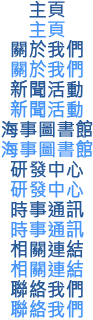
<style>
.page{position:relative;width:93px;height:320px;background:#ffffff}
.page>*{position:absolute;margin:0}
.t1{font:18px/20px "MicrosoftJhengHeiRegular";letter-spacing:0.01em;color:#265797;font-weight:bold}
.t2{font:18px/20px "MicrosoftJhengHeiRegular";letter-spacing:0.01em;color:#4594fa;font-weight:bold}
</style>
<div class="page">
<p class="t1" style="left:1px;top:1px;width:92px;height:317px;text-align:center">主頁<br><span class="t2">主頁<br></span>關於我們<br><span class="t2">關於我們<br></span>新聞活動<br><span class="t2">新聞活動<br></span>海事圖書館<br><span class="t2">海事圖書館<br></span>研發中心<br><span class="t2">研發中心<br></span>時事通訊<br><span class="t2">時事通訊<br></span>相關連結<br><span class="t2">相關連結<br></span>聯絡我們<br><span class="t2">聯絡我們</span></p>
</div>
